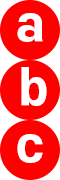
<style>
.page{position:relative;width:60px;height:180px;background:#ff0000}
.page>*{position:absolute;margin:0}
.t1{font:48px "S-CoreDream-7ExtraBold";color:#ffffff}
</style>
<div class="page">
<p class="t1" style="left:17px;top:13px;width:26px;height:29px">a</p>
<p class="t1" style="left:21px;top:67px;width:26px;height:39px">b</p>
<p class="t1" style="left:17px;top:134px;width:26px;height:29px">c</p>
</div>
